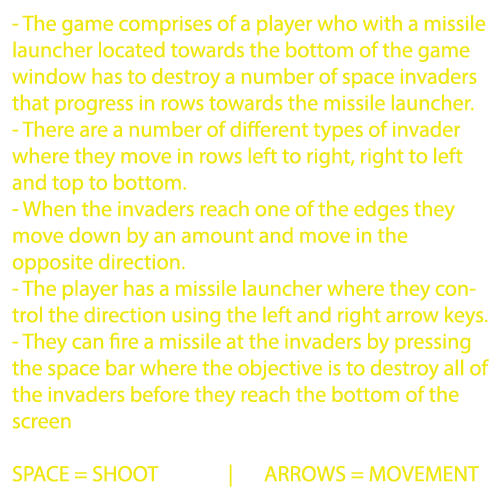
<style>
.page{position:relative;width:500px;height:500px;background:#ffffff}
.page>*{position:absolute;margin:0}
.t1{font:22.1px "MyriadPro-Regular";color:#efe714}
</style>
<div class="page">
<p class="t1" style="left:12px;top:14px;width:477px;height:473px">- The game comprises of a player who with a missile launcher located towards the bottom of the game window has to destroy a number of space invaders that progress in rows towards the missile launcher. <br>- There are a number of different types of invader where they move in rows left to right, right to left and top to bottom. <br>- When the invaders reach one of the edges they move down by an amount and move in the <br>opposite direction.<br>- The player has a missile launcher where they control the direction using the left and right arrow keys.<br>- They can fire a missile at the invaders by pressing the space bar where the objective is to destroy all of the invaders before they reach the bottom of the screen<br><br>SPACE = SHOOT  | ARROWS = MOVEMENT</p>
</div>
